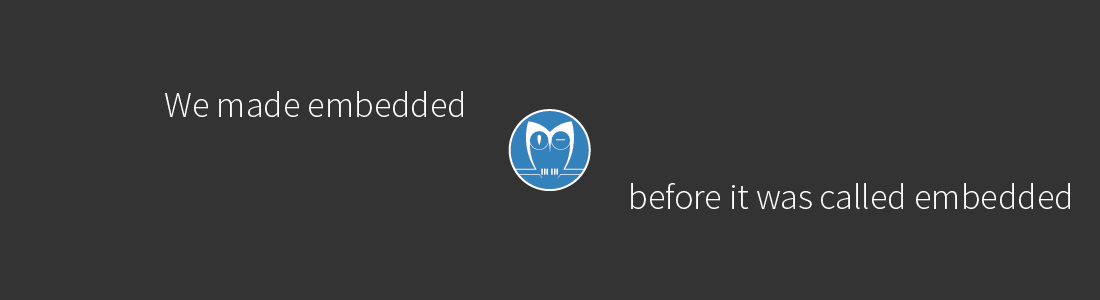
<style>
.page{position:relative;width:1100px;height:300px;background:#333333}
.page>*{position:absolute;margin:0}
.t1{font:36px "SourceSansPro-Light";color:#ffffff}
</style>
<div class="page">
<p class="t1" style="left:165px;top:91px;width:298px;height:26px">We made embedded</p>
<p class="t1" style="left:631px;top:183px;width:439px;height:26px">before it was called embedded</p>
</div>
